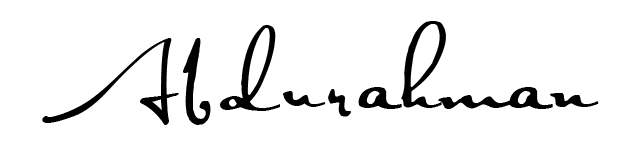
<style>
.page{position:relative;width:640px;height:160px;background:#ffffff}
.page>*{position:absolute;margin:0}
.t1{font:86.4px "Satisfaction";letter-spacing:0.03em;color:#000000}
</style>
<div class="page">
<p class="t1" style="left:42px;top:21px;width:557px;height:104px">Abdurahman</p>
</div>
